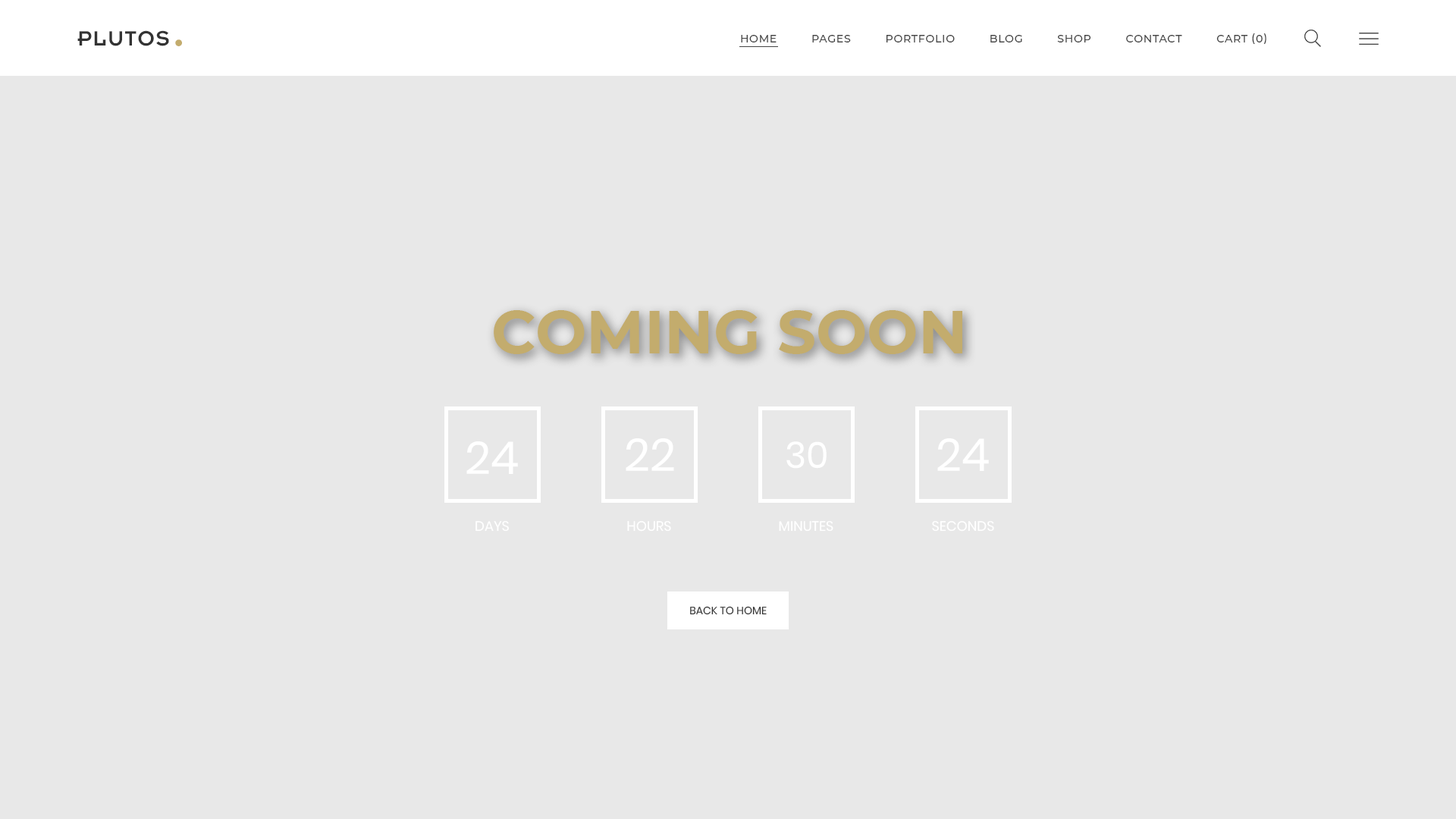
<style>
.page{position:relative;width:1456px;height:819px;background:#e8e8e8}
.page>*{position:absolute;margin:0}
.t1{font:22.7px "Insignia";letter-spacing:0.05em;color:#333333;text-transform:uppercase}
.t2{font:54.6px "Insignia";letter-spacing:0.05em;color:#c3ac6d;text-transform:uppercase}
.t3{font:10.7px "Montserrat-Medium";letter-spacing:0.05em;color:#444444;text-transform:uppercase}
.t4{font:60.7px "Montserrat-Bold";color:#c3ac6d;text-transform:uppercase}
.t5{font:45.5px "Poppins-Regular";color:#ffffff;text-transform:uppercase}
.t6{font:36.4px "Poppins-Regular";color:#ffffff;text-transform:uppercase}
.t7{font:13.6px "Poppins-Regular";color:#ffffff;text-transform:uppercase}
.t8{font:10.6px "Poppins-Regular";color:#333333;text-transform:uppercase}
</style>
<div class="page">
<p class="t1" style="left:77px;top:30px;width:92px;height:16px">Plutos</p>
<p class="t2" style="left:175px;top:39px;width:7px;height:7px">.</p>
<p class="t3" style="left:741px;top:33px;width:525px;height:11px">Home          pages          portfolio          blog          shop          contact          cart (0)</p>
<p class="t4" style="left:494px;top:310px;width:468px;height:44px">Coming soon</p>
<p class="t5" style="left:466px;top:441px;width:52px;height:33px">24</p>
<p class="t5" style="left:626px;top:438px;width:48px;height:33px">22</p>
<p class="t6" style="left:786px;top:441px;width:41px;height:28px">30</p>
<p class="t5" style="left:937px;top:438px;width:52px;height:33px">24</p>
<p class="t7" style="left:475px;top:521px;width:34px;height:11px">Days</p>
<p class="t7" style="left:627px;top:521px;width:44px;height:11px">hours</p>
<p class="t7" style="left:779px;top:521px;width:54px;height:11px">minutes</p>
<p class="t7" style="left:932px;top:521px;width:62px;height:11px">seconds</p>
<p class="t8" style="left:690px;top:606px;width:77px;height:9px">Back to home</p>
</div>
